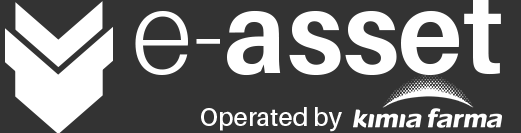
<style>
.page{position:relative;width:521px;height:133px;background:#333333}
.page>*{position:absolute;margin:0}
.t1{font:112.5px "Aileron-Bold";color:#ffffff}
.t2{font:112.5px "Aileron-Light";color:#ffffff}
.t3{font:25px "Aileron-SemiBold";color:#ffffff}
</style>
<div class="page">
<p class="t1" style="left:135px;top:0px;width:366px;height:76px"><span class="t2">e-</span>asset</p>
<p class="t3" style="left:201px;top:107px;width:141px;height:25px">Operated by</p>
</div>
